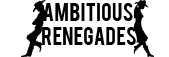
<style>
.page{position:relative;width:169px;height:57px;background:#ffffff}
.page>*{position:absolute;margin:0}
.t1{font:20px "Bebas";color:#000000}
</style>
<div class="page">
<p class="t1" style="left:42px;top:3px;width:94px;height:42px;text-align:center">Ambitious <br>Renegades</p>
</div>
